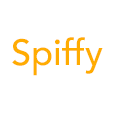
<style>
.page{position:relative;width:114px;height:114px;background:#ffffff}
.page>*{position:absolute;margin:0}
.t1{font:36px "Avenir-Medium";color:#ffac01}
</style>
<div class="page">
<p class="t1" style="left:12px;top:37px;width:91px;height:39px">Spiffy</p>
</div>
